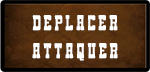
<style>
.page{position:relative;width:150px;height:72px}
.page>*{position:absolute;margin:0}
.t1{font:17.5px/28.3px "Goma-Western";letter-spacing:0.14em;color:#fefefe;font-weight:bold}
</style>
<div class="page">
<p class="t1" style="left:32px;top:15px;width:86px;height:46px;text-align:center">Deplacer<br>ATTAQUER</p>
</div>
